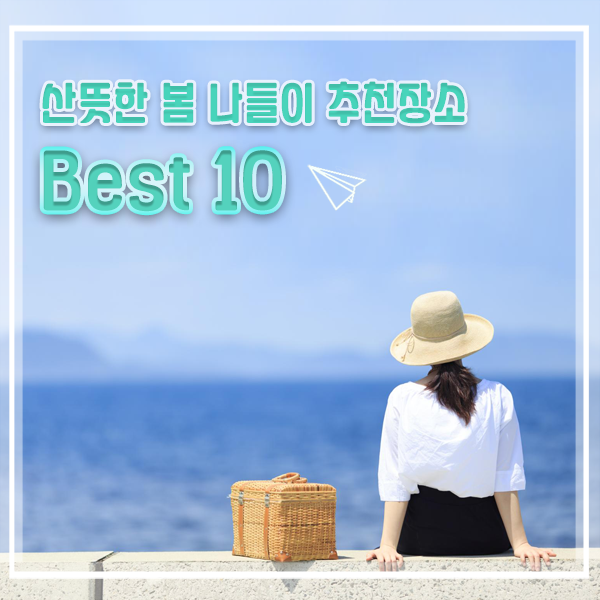
<style>
.page{position:relative;width:600px;height:600px}
.page>*{position:absolute;margin:0}
.t1{font:40px "YANGJIN";letter-spacing:0.025em;color:#48d4bb}
.t2{font:60px "YANGJIN";letter-spacing:0.025em;color:#43c7af}
</style>
<div class="page">
<p class="t1" style="left:42px;top:81px;width:423px;height:43px">산뜻한 봄 나들이 추천장소</p>
<p class="t2" style="left:43px;top:150px;width:239px;height:62px">Best 10</p>
</div>
